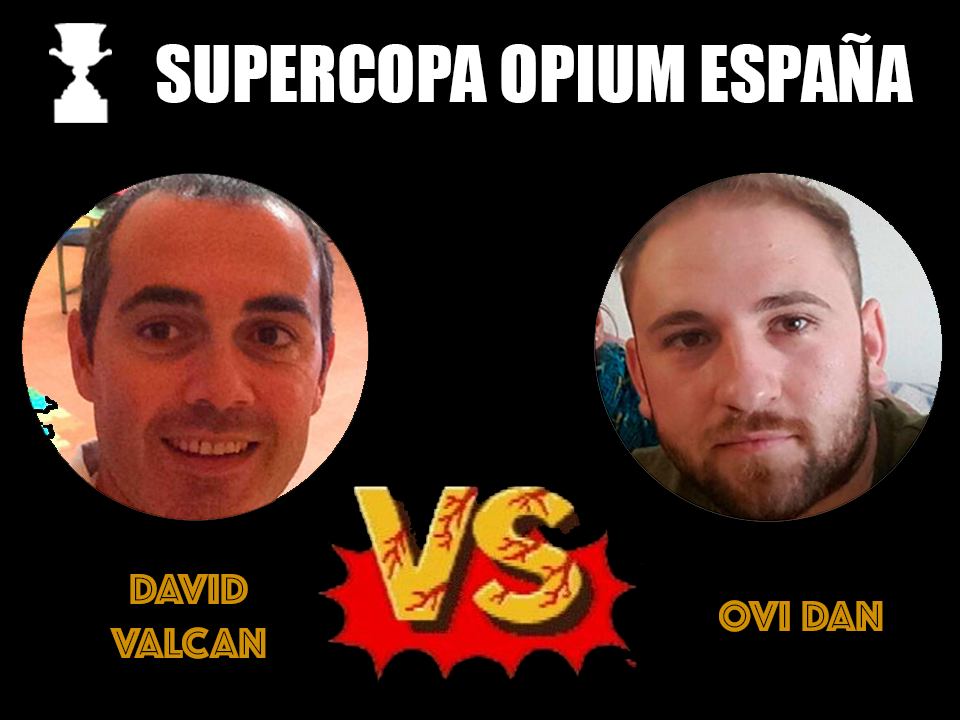
<style>
.page{position:relative;width:960px;height:720px;background:#000000}
.page>*{position:absolute;margin:0}
.t1{font:72px "Impact";color:#ffffff}
.t2{font:45px "Phosphate-Inline";color:#d19004}
</style>
<div class="page">
<p class="t1" style="left:156px;top:33px;width:757px;height:70px">SUPERCOPA OPIUM ESPAÑA</p>
<p class="t2" style="left:110px;top:574px;width:156px;height:85px;text-align:center">DAVID<br>VALCAN</p>
<p class="t2" style="left:719px;top:600px;width:164px;height:32px">OVI DAN</p>
</div>
